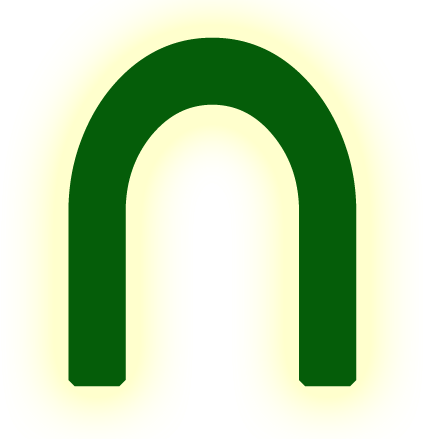
<style>
.page{position:relative;width:439px;height:439px;background:#055d09}
.page>*{position:absolute;margin:0}
.t1{font:510px "alexey";color:#055d09;font-weight:bold;scale:0.82 1}
</style>
<div class="page">
<p class="t1" style="left:68px;top:37px;width:289px;height:350px">N</p>
</div>
